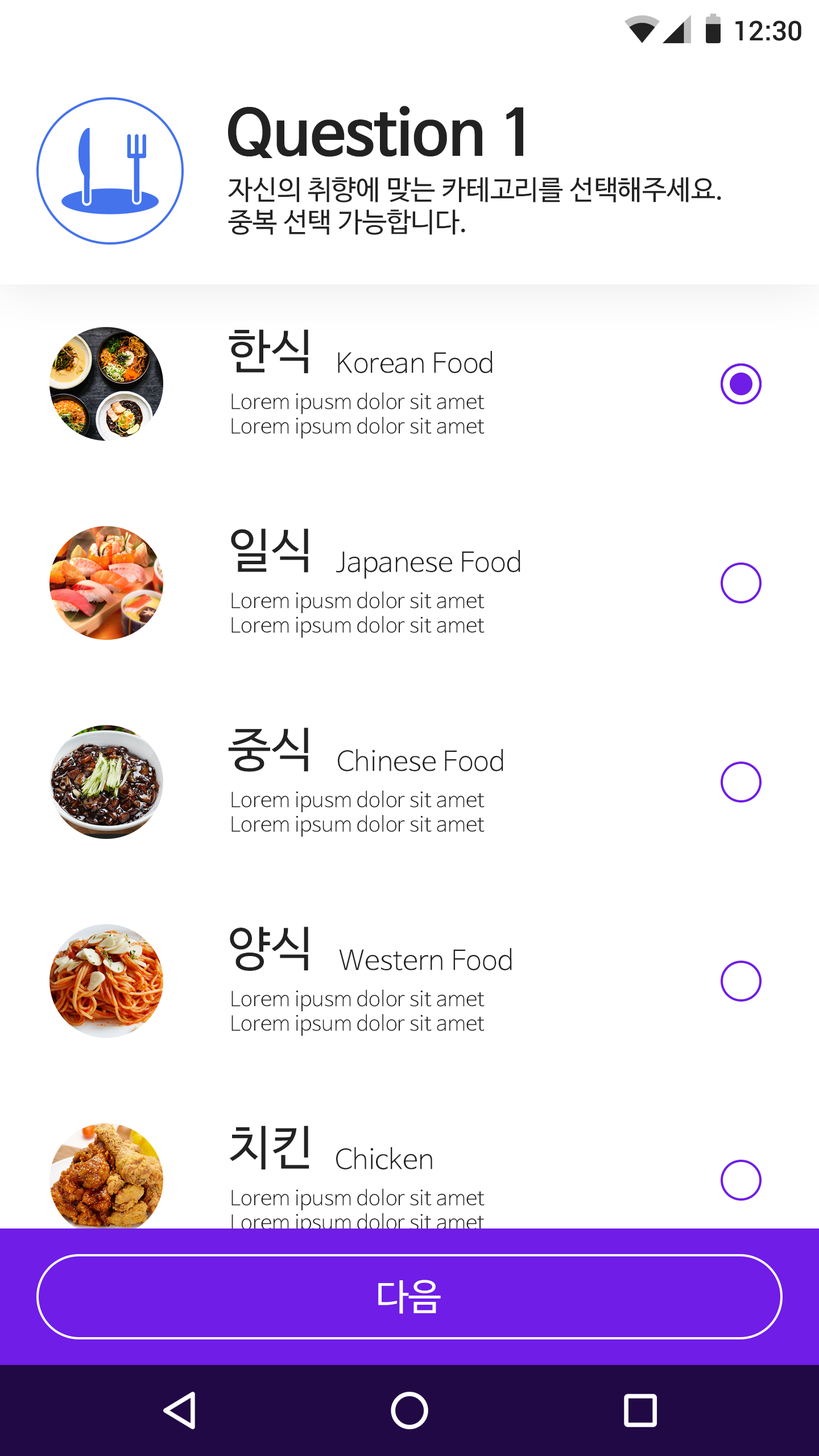
<style>
.page{position:relative;width:819px;height:1456px;background:#ffffff}
.page>*{position:absolute;margin:0}
.t1{font:27.3px "Roboto-Medium";color:#222222}
.t2{font:62.6px "NanumBarunGothicBold";color:#222222}
.t3{font:27.3px "NanumBarunGothic";color:#222222}
.t4{font:47.8px "NanumBarunGothic";color:#222222}
.t5{font:27.3px "NanumBarunGothicLight";color:#222222}
.t6{font:20.5px "NanumBarunGothicLight";color:#222222}
.t7{font:36.4px "NanumBarunGothic";color:#ffffff}
</style>
<div class="page">
<p class="t1" style="left:735px;top:20px;width:66px;height:21px">12:30</p>
<p class="t2" style="left:227px;top:106px;width:296px;height:52px">Question 1</p>
<p class="t3" style="left:228px;top:177px;width:493px;height:58px">자신의 취향에 맞는 카테고리를 선택해주세요.<br>중복 선택 가능합니다.</p>
<p class="t4" style="left:229px;top:329px;width:79px;height:45px">한식</p>
<p class="t5" style="left:338px;top:351px;width:155px;height:23px">Korean Food</p>
<p class="t6" style="left:231px;top:392px;width:254px;height:47px">Lorem ipusm dolor sit amet<br>Lorem ipsum dolor sit amet</p>
<p class="t4" style="left:231px;top:528px;width:77px;height:45px">일식</p>
<p class="t5" style="left:336px;top:550px;width:184px;height:29px">Japanese Food</p>
<p class="t6" style="left:231px;top:591px;width:254px;height:47px">Lorem ipusm dolor sit amet<br>Lorem ipsum dolor sit amet</p>
<p class="t4" style="left:228px;top:727px;width:80px;height:45px">중식</p>
<p class="t5" style="left:338px;top:749px;width:165px;height:22px">Chinese Food</p>
<p class="t6" style="left:231px;top:791px;width:254px;height:46px">Lorem ipusm dolor sit amet<br>Lorem ipsum dolor sit amet</p>
<p class="t4" style="left:230px;top:926px;width:78px;height:45px">양식</p>
<p class="t5" style="left:339px;top:948px;width:173px;height:22px">Western Food</p>
<p class="t6" style="left:231px;top:990px;width:254px;height:46px">Lorem ipusm dolor sit amet<br>Lorem ipsum dolor sit amet</p>
<p class="t4" style="left:229px;top:1126px;width:80px;height:44px">치킨</p>
<p class="t5" style="left:336px;top:1147px;width:96px;height:23px">Chicken</p>
<p class="t6" style="left:231px;top:1189px;width:254px;height:46px">Lorem ipusm dolor sit amet<br>Lorem ipsum dolor sit amet</p>
<p class="t7" style="left:378px;top:1280px;width:63px;height:34px">다음</p>
</div>
